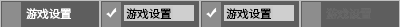
<style>
.page{position:relative;width:400px;height:27px;background:#5e5e5e}
.page>*{position:absolute;margin:0}
.t1{font:11.4px "SourceHanSansSC-Normal";color:#ffffff}
.t2{font:11.4px "SourceHanSansSC-Normal";color:#000000}
.t3{font:11.4px "SourceHanSansSC-Normal";color:#646464}
</style>
<div class="page">
<p class="t1" style="left:26px;top:8px;width:45px;height:11px">游戏设置</p>
<p class="t2" style="left:126px;top:8px;width:45px;height:11px">游戏设置</p>
<p class="t2" style="left:226px;top:8px;width:45px;height:11px">游戏设置</p>
<p class="t3" style="left:326px;top:8px;width:45px;height:11px">游戏设置</p>
</div>
